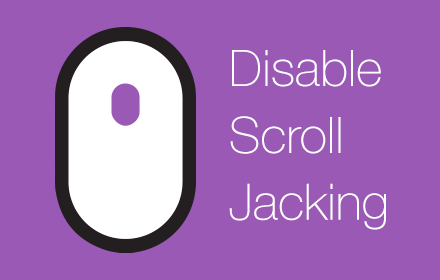
<style>
.page{position:relative;width:440px;height:280px;background:#9b59b6}
.page>*{position:absolute;margin:0}
.t1{font:50.2px/67px "HelveticaNeue-Thin";color:#ffffff}
</style>
<div class="page">
<p class="t1" style="left:229px;top:50px;width:157px;height:180px">Disable<br>Scroll<br>Jacking</p>
</div>
